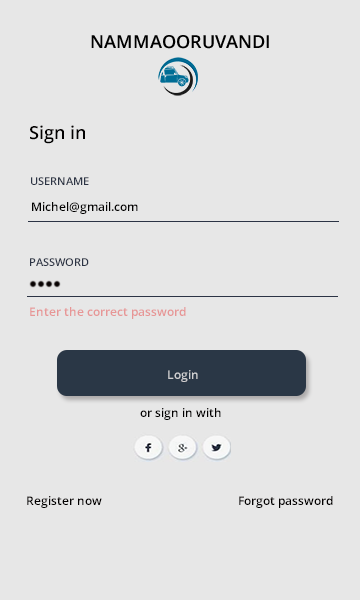
<style>
.page{position:relative;width:360px;height:600px;background:#e7e7e7}
.page>*{position:absolute;margin:0}
.t1{font:18px "OpenSans-Semibold";color:#020000}
.t2{font:11px "OpenSans-Semibold";color:#2c3445}
.t3{font:12px "OpenSans-Semibold";color:#020101}
.t4{font:12px "OpenSans-Semibold";color:#e79696}
.t5{font:12px "OpenSans-Semibold";color:#e7e7e7}
.t6{font:12px "OpenSans-Semibold";color:#020000}
.t7{font:12px "OpenSans-Semibold";color:#030101}
</style>
<div class="page">
<p class="t1" style="left:30px;top:125px;width:55px;height:19px">Sign in</p>
<p class="t2" style="left:31px;top:177px;width:58px;height:8px">USERNAME</p>
<p class="t3" style="left:32px;top:202px;width:106px;height:12px">Michel@gmail.com</p>
<p class="t2" style="left:30px;top:258px;width:59px;height:8px">PASSWORD</p>
<p class="t4" style="left:30px;top:307px;width:156px;height:12px">Enter the correct password</p>
<p class="t5" style="left:168px;top:370px;width:30px;height:12px;opacity:0.7">Login</p>
<p class="t6" style="left:140px;top:408px;width:81px;height:12px">or sign in with</p>
<p class="t7" style="left:27px;top:496px;width:75px;height:12px">Register now</p>
<p class="t6" style="left:239px;top:496px;width:94px;height:12px">Forgot password</p>
</div>
